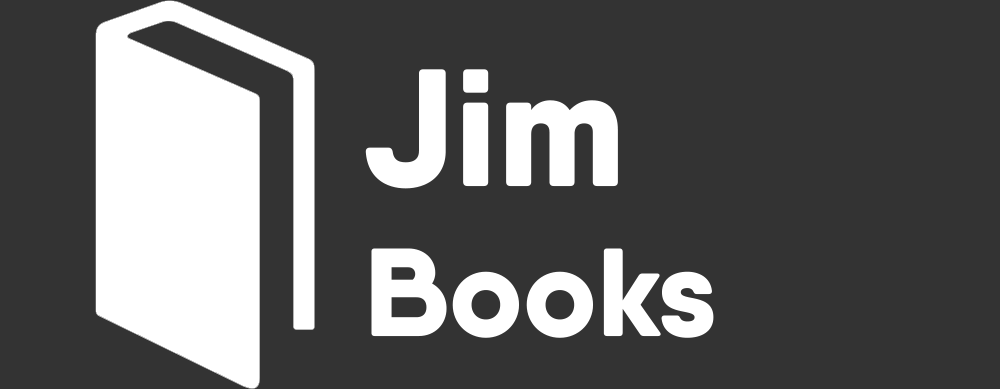
<style>
.page{position:relative;width:1000px;height:389px;background:#333333}
.page>*{position:absolute;margin:0}
.t1{font:125px "QanelasSoftDEMO-ExtraBold";color:#ffffff}
.t2{font:166.7px "QanelasSoftDEMO-ExtraBold";color:#ffffff}
</style>
<div class="page">
<p class="t1" style="left:365px;top:69px;width:349px;height:269px;text-align:right"><span class="t2">Jim<br></span>Books</p>
</div>
